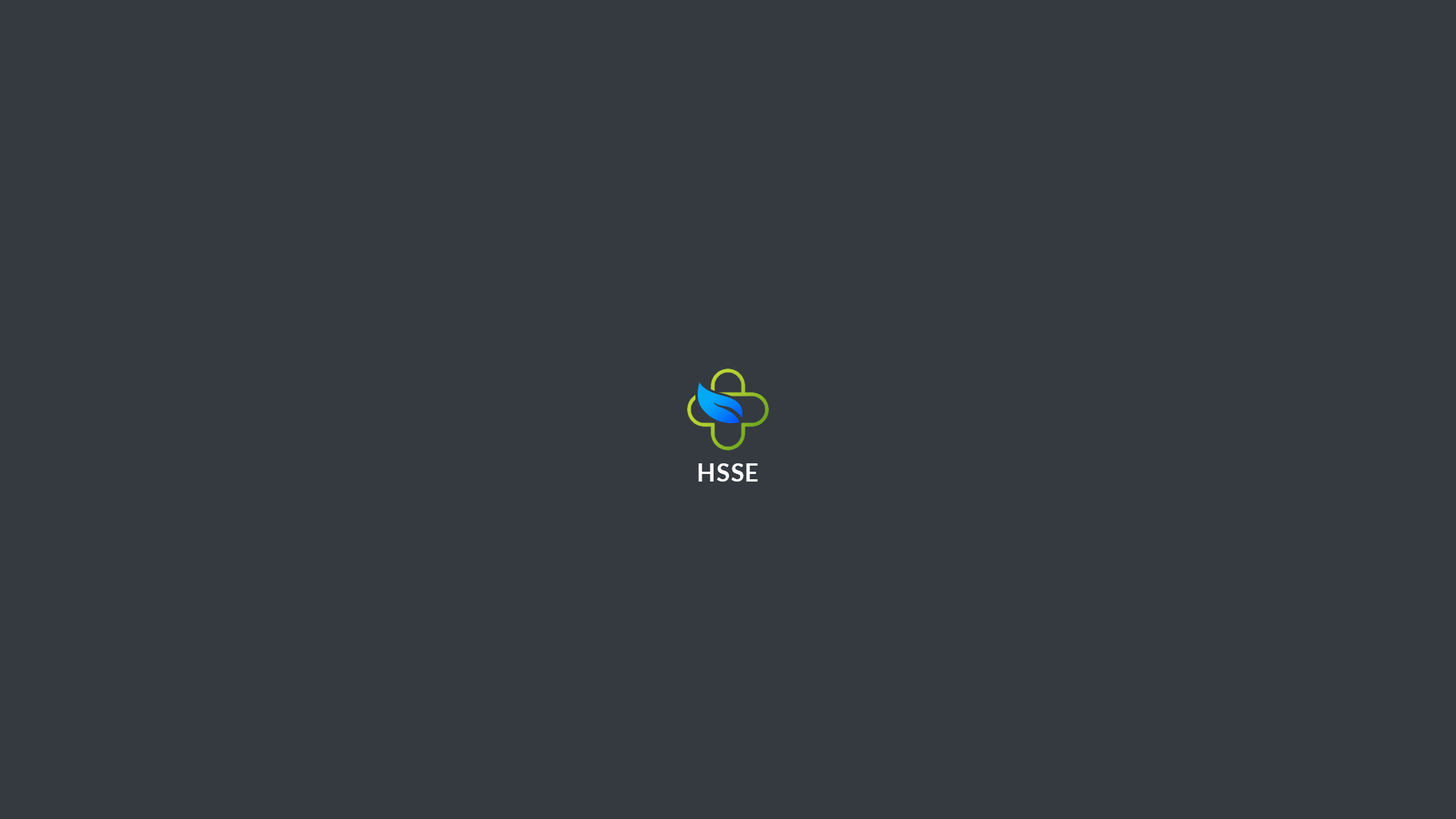
<style>
.page{position:relative;width:1456px;height:819px;background:#343a40}
.page>*{position:absolute;margin:0}
.t1{font:24.3px "Lato-Bold";letter-spacing:0.05em;color:#fffefe}
</style>
<div class="page">
<p class="t1" style="left:698px;top:463px;width:60px;height:19px">HSSE</p>
</div>
